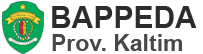
<style>
.page{position:relative;width:203px;height:54px;background:#ffffff}
.page>*{position:absolute;margin:0}
.t1{font:30px "Arial-BoldMT";color:#2c2c2c;text-transform:uppercase}
.t2{font:23px "Arial-BoldMT";color:#494848}
.t3{font:23px "Arial-BoldMT";color:#494848;text-transform:uppercase}
</style>
<div class="page">
<p class="t1" style="left:52px;top:6px;width:145px;height:22px">BAPPEDA</p>
<p class="t2" style="left:52px;top:34px;width:130px;height:17px"><span class="t3">p</span>rov. Kaltim</p>
</div>
